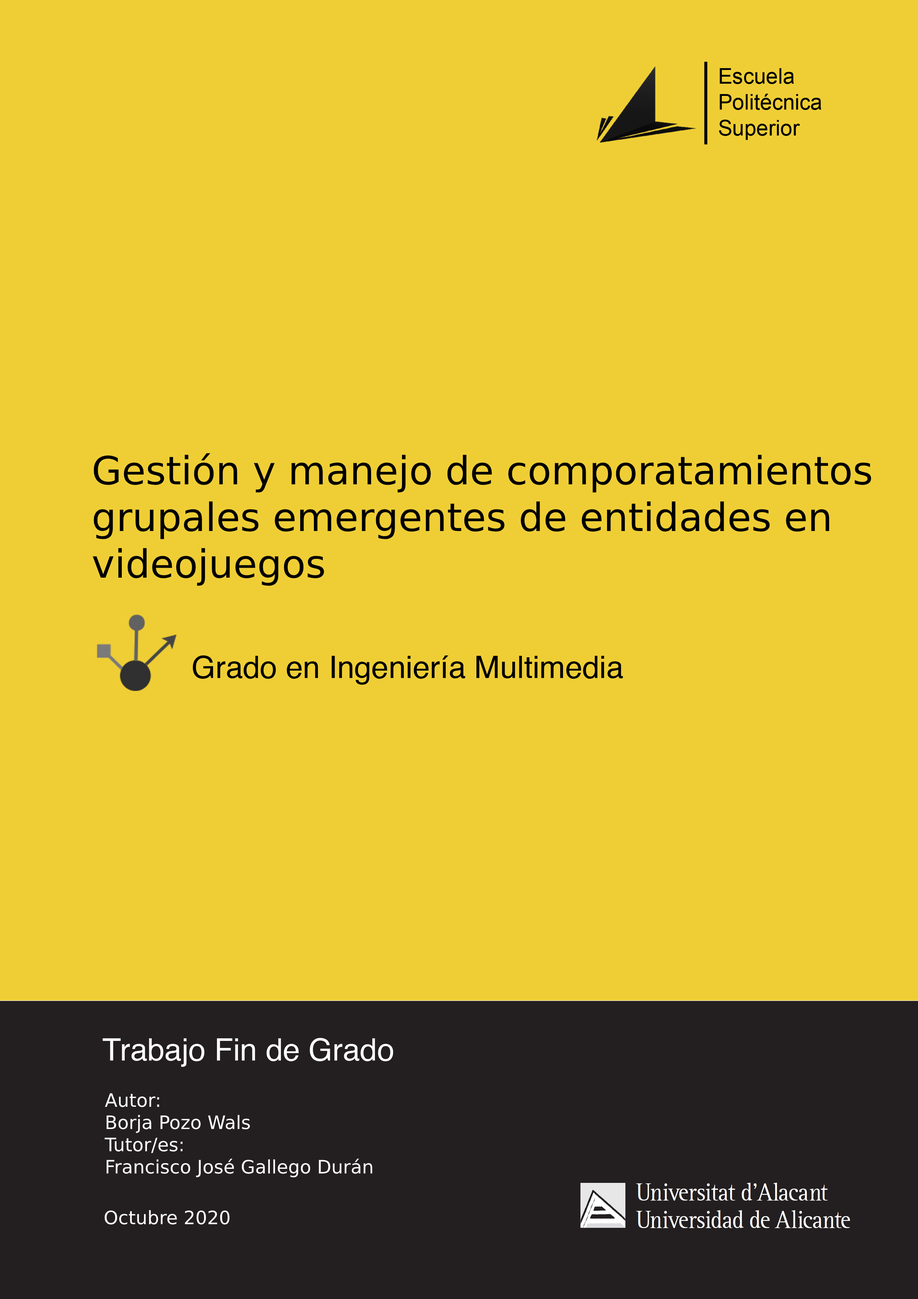
<style>
.page{position:relative;width:918px;height:1299px;background:#efce35}
.page>*{position:absolute;margin:0}
.t1{font:38.9px "HelveticaLTStd-Cond";color:#000000}
.t2{font:30.9px "Helvetica";color:#000000}
.t3{font:30.9px "Helvetica";color:#ffffff}
.t4{font:18.5px "Helvetica";color:#ffffff}
</style>
<div class="page">
<p class="t1" style="left:93px;top:453px;width:779px;height:133px">Gestión y manejo de comporatamientos<br>grupales emergentes de entidades en <br>videojuegos</p>
<p class="t2" style="left:193px;top:655px;width:430px;height:30px">Grado en Ingeniería Multimedia</p>
<p class="t3" style="left:103px;top:1038px;width:290px;height:29px">Trabajo Fin de Grado</p>
<p class="t4" style="left:104px;top:1093px;width:268px;height:84px">Autor:<br>Borja Pozo Wals<br>Tutor/es:<br>Francisco José Gallego Durán</p>
<p class="t4" style="left:104px;top:1210px;width:126px;height:14px">Octubre 2020</p>
</div>
